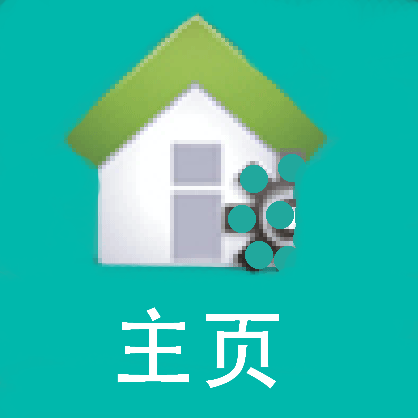
<style>
.page{position:relative;width:418px;height:418px;background:#00b8ac}
.page>*{position:absolute;margin:0}
.t1{font:88px "AdobeHeitiStd-Regular";color:#ffffff}
</style>
<div class="page">
<p class="t1" style="left:117px;top:307px;width:162px;height:83px">主页</p>
</div>
